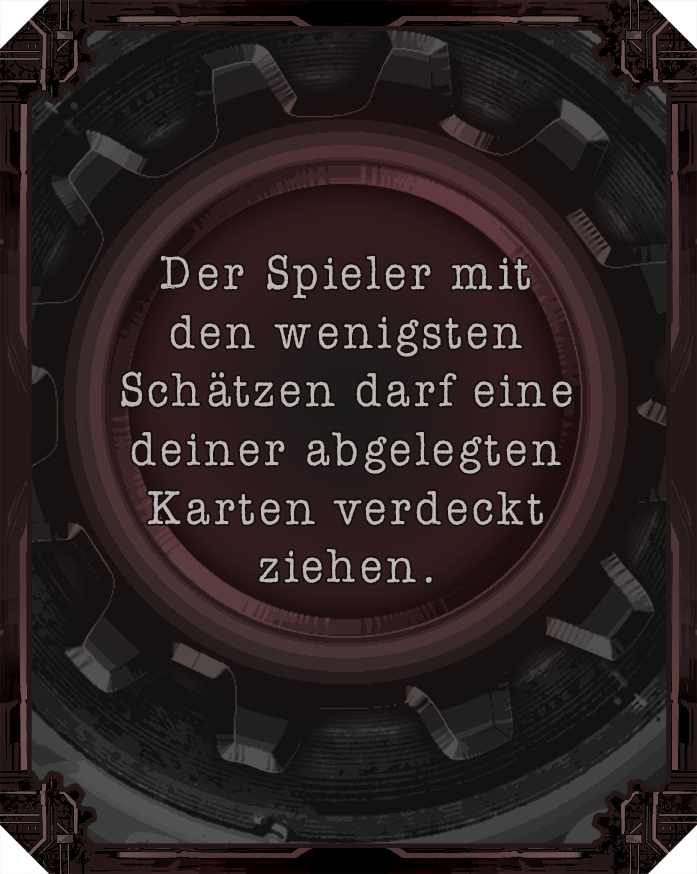
<style>
.page{position:relative;width:697px;height:874px}
.page>*{position:absolute;margin:0}
.t1{font:48.8px "AmerTypewriterITCbyBT-Medium";letter-spacing:0.02em;color:#c0b5b5}
</style>
<div class="page">
<p class="t1" style="left:121px;top:254px;width:451px;height:329px;text-align:center">Der Spieler mit den wenigsten Schätzen darf eine deiner abgelegten Karten verdeckt ziehen.</p>
</div>
